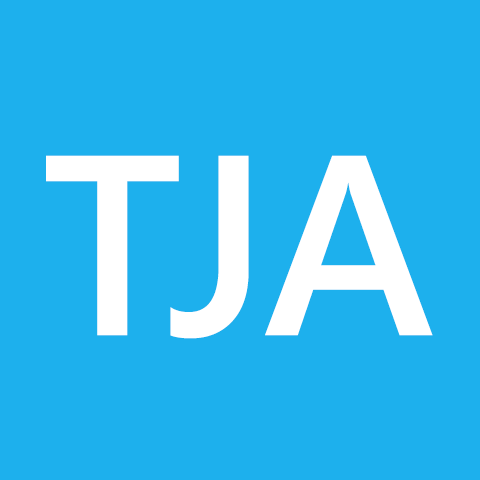
<style>
.page{position:relative;width:480px;height:480px;background:#1db0ed}
.page>*{position:absolute;margin:0}
.t1{font:256px "SegoeUI-Semibold";color:#ffffff}
</style>
<div class="page">
<p class="t1" style="left:46px;top:155px;width:387px;height:184px">TJA</p>
</div>
